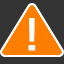
<style>
.page{position:relative;width:64px;height:64px;background:#333333}
.page>*{position:absolute;margin:0}
.t1{font:44.4px "LucidaConsole";color:#ffffff;font-weight:bold}
</style>
<div class="page">
<p class="t1" style="left:28px;top:18px;width:8px;height:33px">!</p>
</div>
